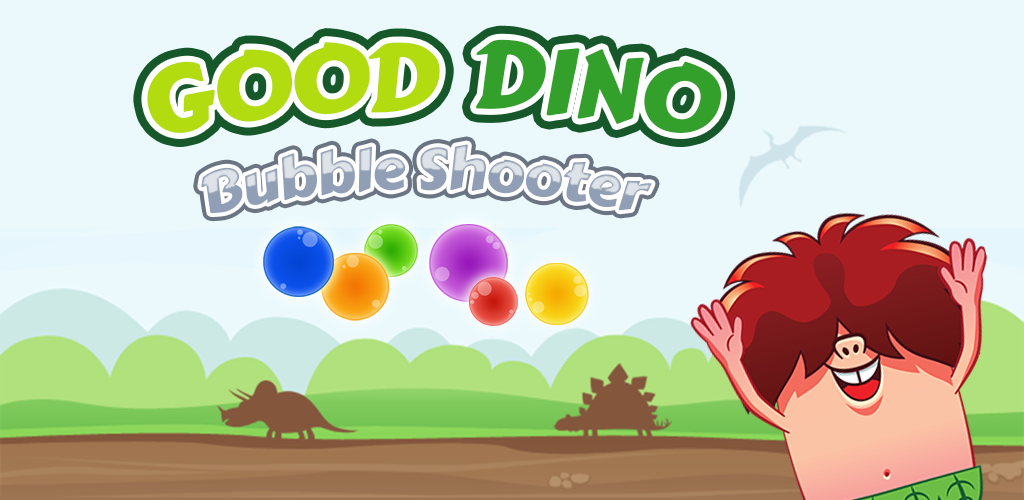
<style>
.page{position:relative;width:1024px;height:500px;background:#ebf9fd}
.page>*{position:absolute;margin:0}
.t1{font:93.4px "CarterOne";letter-spacing:-0.02em;color:#33a02c}
.t2{font:93.4px "CarterOne";letter-spacing:-0.02em;color:#b3dc10}
.t3{font:58px "CarterOne";letter-spacing:-0.02em}
</style>
<div class="page">
<p class="t1" style="left:476px;top:39px;width:246px;height:94px">DINO</p>
<p class="t2" style="left:147px;top:42px;width:293px;height:91px">GOOD</p>
<p class="t3" style="left:201px;top:144px;width:451px;height:69px">Bubble Shooter</p>
</div>
